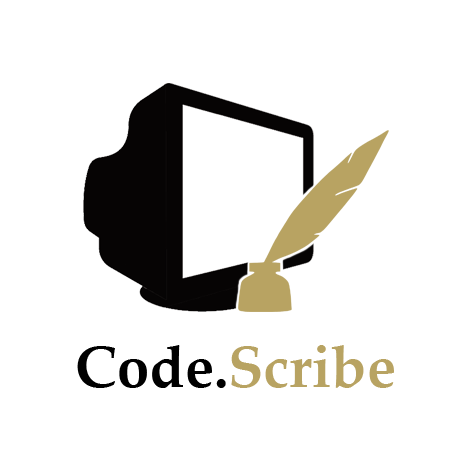
<style>
.page{position:relative;width:472px;height:472px;background:#ffffff}
.page>*{position:absolute;margin:0}
.t1{font:58.3px "PalatinoLinotype-Bold";color:#000000}
.t2{font:58.3px "PalatinoLinotype-Bold";color:#b8a362}
</style>
<div class="page">
<p class="t1" style="left:77px;top:345px;width:149px;height:43px">Code.</p>
<p class="t2" style="left:231px;top:345px;width:163px;height:43px">Scribe</p>
</div>
